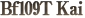
<style>
.page{position:relative;width:85px;height:18px;background:#ffffff}
.page>*{position:absolute;margin:0}
.t1{font:18px "RyuminPro-ExBold";letter-spacing:-0.08em;color:#4a3f32;font-weight:bold;scale:0.9 1}
</style>
<div class="page">
<p class="t1" style="left:0px;top:1px;width:83px;height:15px">Bf109T Kai</p>
</div>
